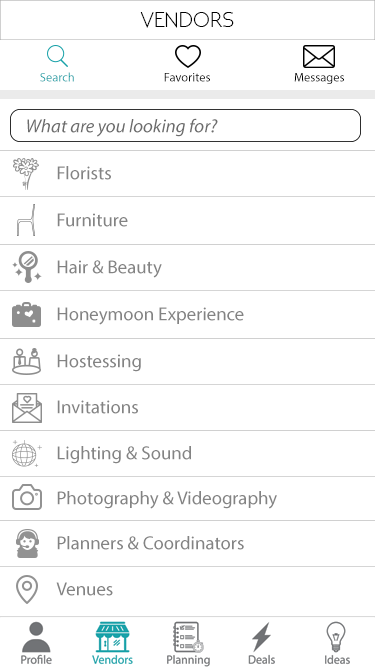
<style>
.page{position:relative;width:375px;height:667px;background:#ffffff}
.page>*{position:absolute;margin:0}
.t1{font:21.9px "NEOTERIC";color:#000000}
.t2{font:12.5px "MyriadPro-Regular";color:#18a1a8}
.t3{font:12.5px "MyriadPro-Regular";color:#000000}
.t4{font:18.8px "MyriadPro-It";color:#6c6c6c}
.t5{font:18.8px "MyriadPro-Regular";color:#838383}
</style>
<div class="page">
<p class="t1" style="left:140px;top:12px;width:94px;height:16px">VENDORS</p>
<p class="t2" style="left:40px;top:72px;width:34px;height:10px">Search</p>
<p class="t3" style="left:164px;top:73px;width:46px;height:9px">Favorites</p>
<p class="t3" style="left:294px;top:73px;width:50px;height:11px">Messages</p>
<p class="t4" style="left:27px;top:118px;width:191px;height:19px">What are you looking for?</p>
<p class="t5" style="left:57px;top:166px;width:54px;height:14px">Florists</p>
<p class="t5" style="left:57px;top:213px;width:71px;height:14px">Furniture</p>
<p class="t5" style="left:57px;top:260px;width:105px;height:18px">Hair &amp; Beauty</p>
<p class="t5" style="left:57px;top:307px;width:187px;height:18px">Honeymoon Experience</p>
<p class="t5" style="left:57px;top:354px;width:84px;height:18px">Hostessing</p>
<p class="t5" style="left:57px;top:400px;width:81px;height:14px">Invitations</p>
<p class="t5" style="left:57px;top:446px;width:134px;height:18px">Lighting &amp; Sound</p>
<p class="t5" style="left:57px;top:491px;width:220px;height:18px">Photography &amp; Videography</p>
<p class="t5" style="left:57px;top:536px;width:187px;height:14px">Planners &amp; Coordinators</p>
<p class="t5" style="left:56px;top:582px;width:57px;height:14px">Venues</p>
</div>
